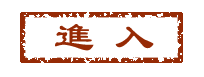
<style>
.page{position:relative;width:204px;height:77px;background:#ffffff}
.page>*{position:absolute;margin:0}
.t1{font:40px "LiSu";color:#962a05}
</style>
<div class="page">
<p class="t1" style="left:55px;top:24px;width:99px;height:27px">進 入</p>
</div>
